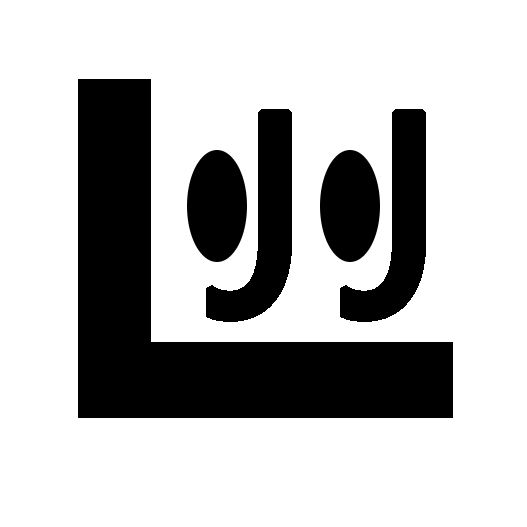
<style>
.page{position:relative;width:527px;height:527px;background:#ffffff}
.page>*{position:absolute;margin:0}
.t1{font:266.7px "MicrosoftYaHei";letter-spacing:0.18em;color:#000000;font-weight:bold}
</style>
<div class="page">
<p class="t1" style="left:206px;top:109px;width:86px;height:213px">J</p>
<p class="t1" style="left:340px;top:109px;width:86px;height:213px">J</p>
</div>
